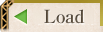
<style>
.page{position:relative;width:103px;height:32px}
.page>*{position:absolute;margin:0}
.t1{font:18px "RyuminPro-ExBold";letter-spacing:-0.04em}
</style>
<div class="page">
<p class="t1" style="left:44px;top:9px;width:41px;height:15px">Load</p>
</div>
